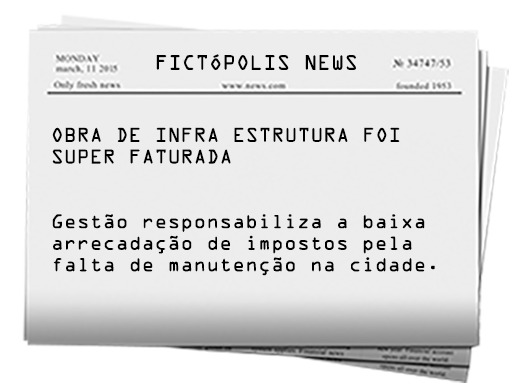
<style>
.page{position:relative;width:512px;height:387px;background:#ededed}
.page>*{position:absolute;margin:0}
.t1{font:18.8px "OCRAStd";color:#000000}
.t2{font:18px "OCRAStd";color:#000000}
</style>
<div class="page">
<p class="t1" style="left:156px;top:54px;width:200px;height:16px">FICTÓPOLIS NEWS</p>
<p class="t2" style="left:52px;top:127px;width:383px;height:149px">OBRA DE INFRA ESTRUTURA FOI<br>SUPER FATURADA<br><br><br>Gestão responsabiliza a baixa <br>arrecadação de impostos pela <br>falta de manutenção na cidade.</p>
</div>
